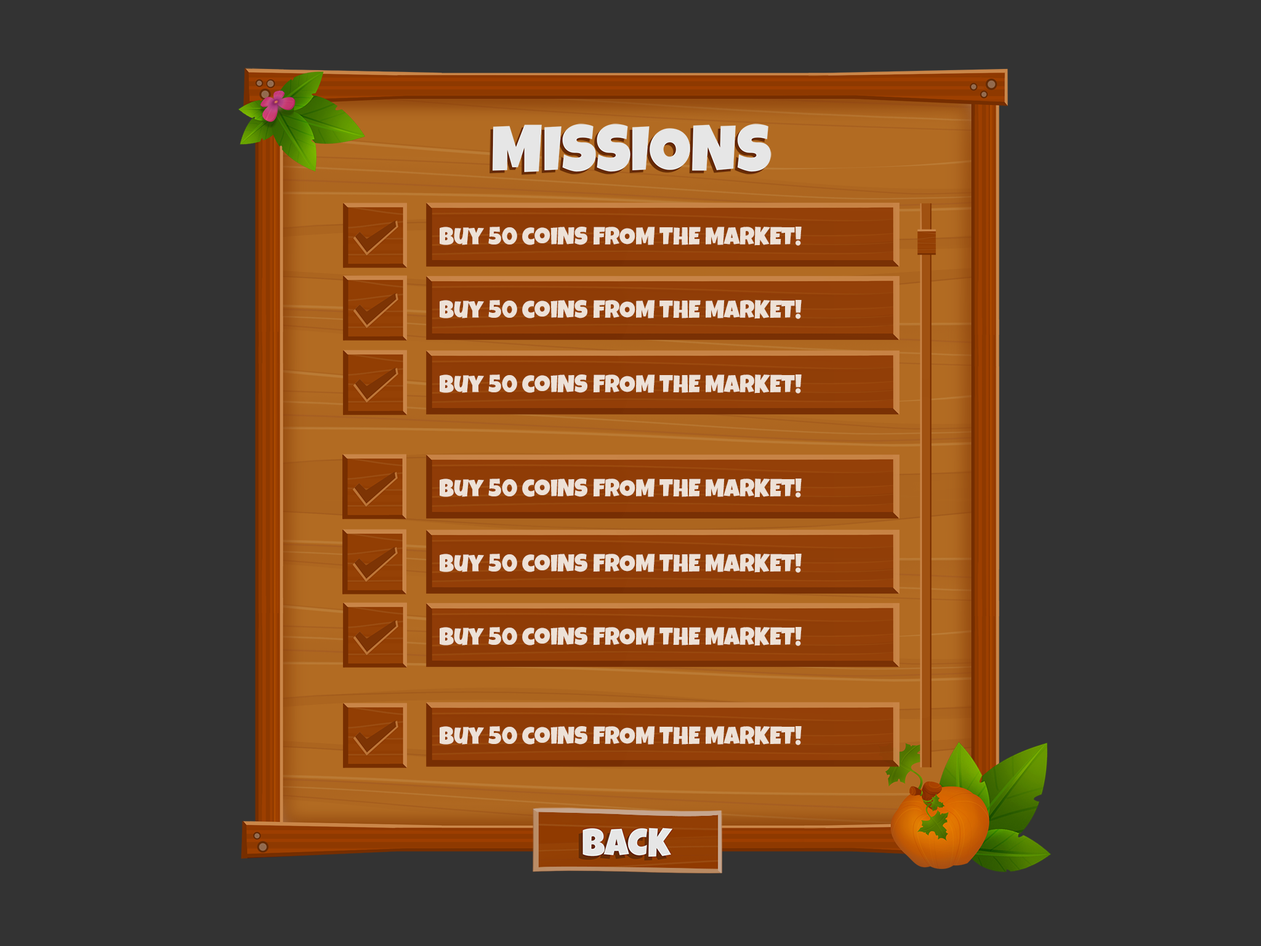
<style>
.page{position:relative;width:1261px;height:946px;background:#333333}
.page>*{position:absolute;margin:0}
.t1{font:24.6px "LuckiestGuy-Regular";color:#ede1d7}
</style>
<div class="page">
<p class="t1" style="left:440px;top:227px;width:362px;height:19px">Buy 50 coiNS FROM THE MARKET!</p>
<p class="t1" style="left:440px;top:300px;width:362px;height:19px">Buy 50 coiNS FROM THE MARKET!</p>
<p class="t1" style="left:440px;top:374px;width:362px;height:19px">Buy 50 coiNS FROM THE MARKET!</p>
<p class="t1" style="left:440px;top:478px;width:362px;height:19px">Buy 50 coiNS FROM THE MARKET!</p>
<p class="t1" style="left:440px;top:553px;width:362px;height:20px">Buy 50 coiNS FROM THE MARKET!</p>
<p class="t1" style="left:440px;top:627px;width:362px;height:19px">Buy 50 coiNS FROM THE MARKET!</p>
<p class="t1" style="left:440px;top:726px;width:362px;height:19px">Buy 50 coiNS FROM THE MARKET!</p>
</div>
